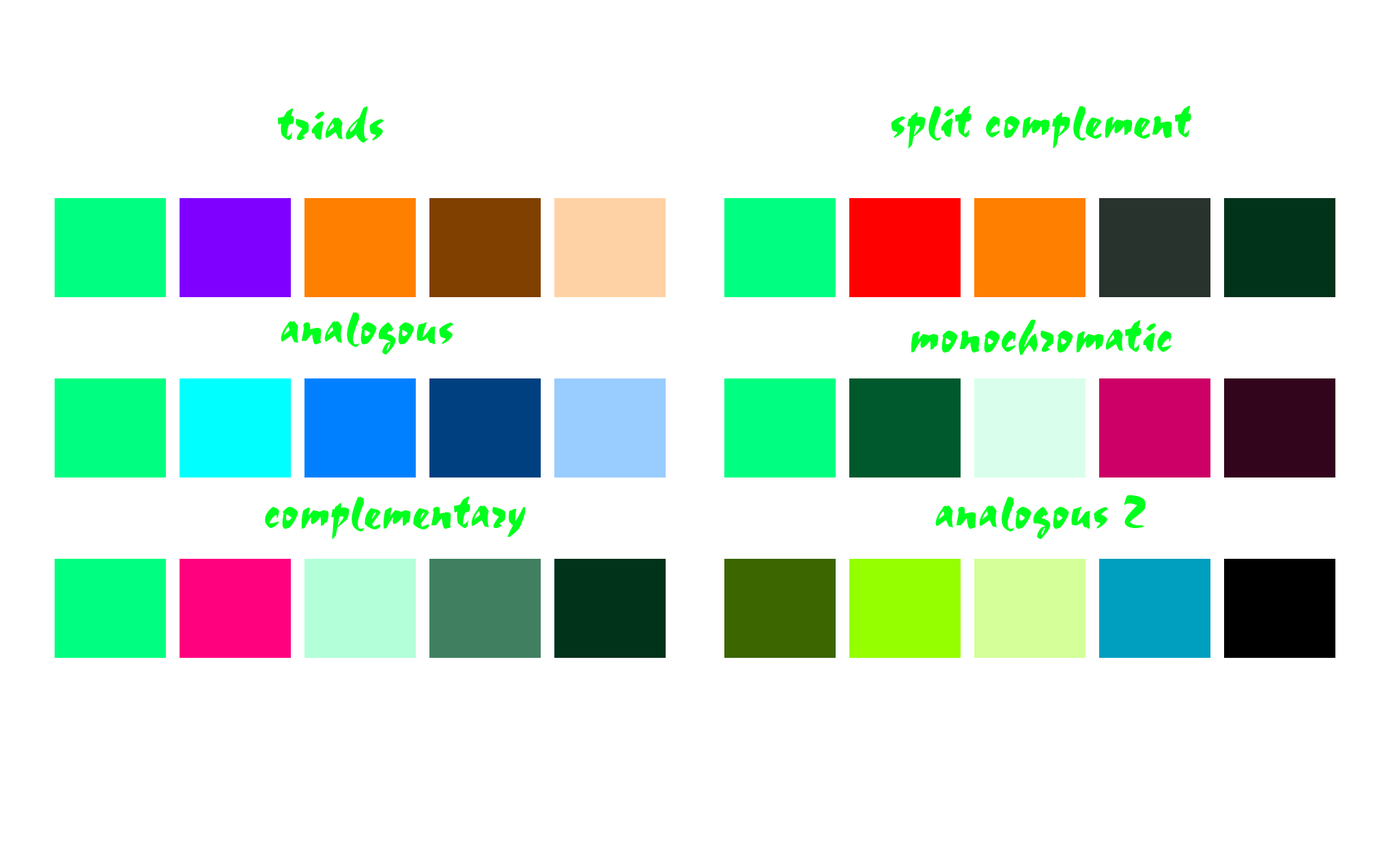
<style>
.page{position:relative;width:1390px;height:858px;background:#ffffff}
.page>*{position:absolute;margin:0}
.t1{font:51.2px "Staccato555BT-RegularA";color:#00ff1e}
</style>
<div class="page">
<p class="t1" style="left:278px;top:107px;width:106px;height:36px">triads</p>
<p class="t1" style="left:891px;top:106px;width:301px;height:42px">split complement</p>
<p class="t1" style="left:281px;top:312px;width:173px;height:42px">analogous</p>
<p class="t1" style="left:911px;top:320px;width:261px;height:35px">monochromatic</p>
<p class="t1" style="left:265px;top:496px;width:261px;height:43px">complementary</p>
<p class="t1" style="left:936px;top:495px;width:210px;height:44px">analogous 2</p>
</div>
